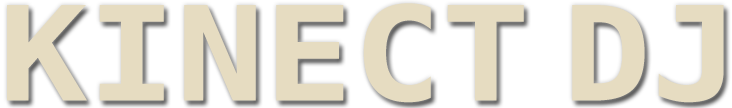
<style>
.page{position:relative;width:732px;height:108px;background:#e6dcc1}
.page>*{position:absolute;margin:0}
.t1{font:130.7px "Menlo-Bold";color:#e6dcc1;scale:1.12 1}
</style>
<div class="page">
<p class="t1" style="left:7px;top:3px;width:717px;height:100px">KINECT DJ</p>
</div>
